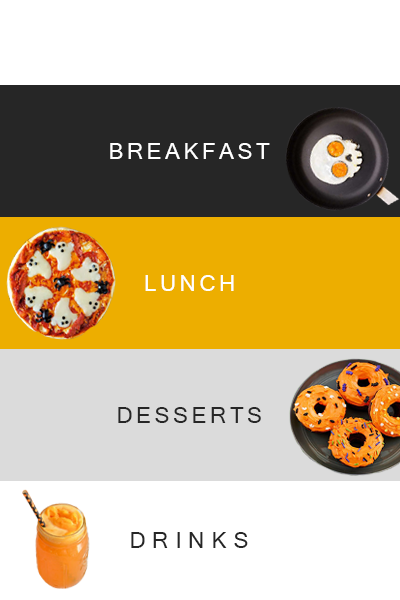
<style>
.page{position:relative;width:400px;height:600px;background:#ffffff}
.page>*{position:absolute;margin:0}
.t1{font:25px "Vrinda";color:#ffffff}
.t2{font:25px "Vrinda";color:#262626}
</style>
<div class="page">
<p class="t1" style="left:110px;top:143px;width:160px;height:16px">BREAKFAST</p>
<p class="t1" style="left:145px;top:275px;width:89px;height:16px">LUNCH</p>
<p class="t2" style="left:118px;top:407px;width:143px;height:16px">DESSERTS</p>
<p class="t2" style="left:131px;top:532px;width:117px;height:16px">DRINKS</p>
</div>
